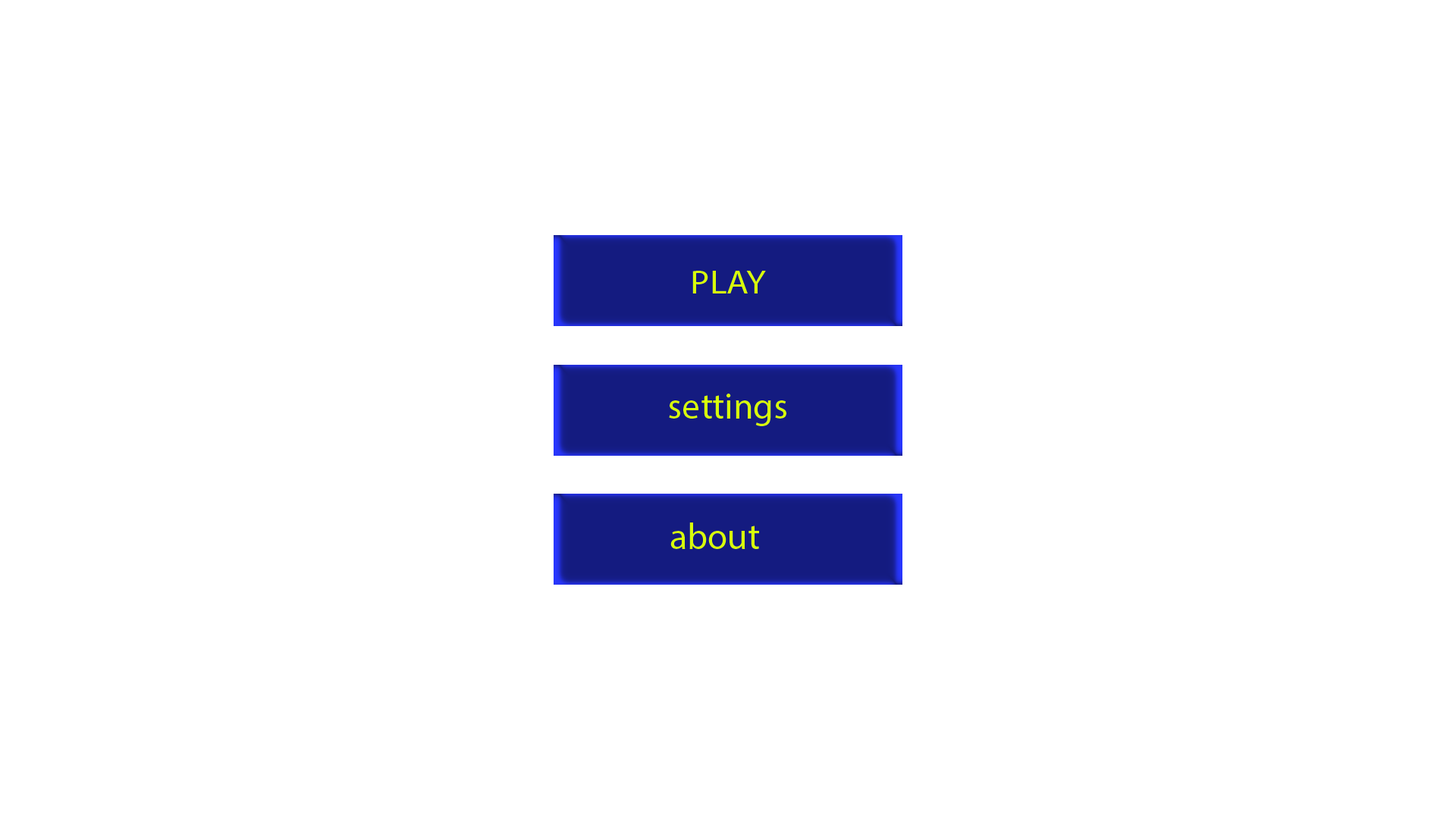
<style>
.page{position:relative;width:1456px;height:819px;background:#ffffff}
.page>*{position:absolute;margin:0}
.t1{font:33.5px "MyriadPro-Regular";color:#d8ff0a;scale:1.09 1}
.t2{font:36.4px "MyriadPro-Regular";color:#d8ff0a}
</style>
<div class="page">
<p class="t1" style="left:692px;top:271px;width:74px;height:22px">PLAY</p>
<p class="t2" style="left:669px;top:394px;width:117px;height:32px">settings</p>
<p class="t2" style="left:670px;top:522px;width:89px;height:27px">about</p>
</div>
